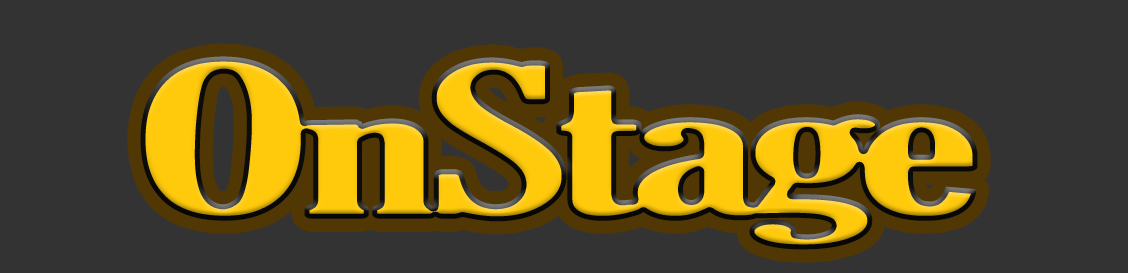
<style>
.page{position:relative;width:1128px;height:273px;background:#333333}
.page>*{position:absolute;margin:0}
.t1{font:203.3px "GloucesterMT-ExtraCondensed";letter-spacing:-0.05em;font-weight:bold;scale:1.93 1}
</style>
<div class="page">
<p class="t1" style="left:140px;top:56px;width:838px;height:194px">OnStage</p>
</div>
